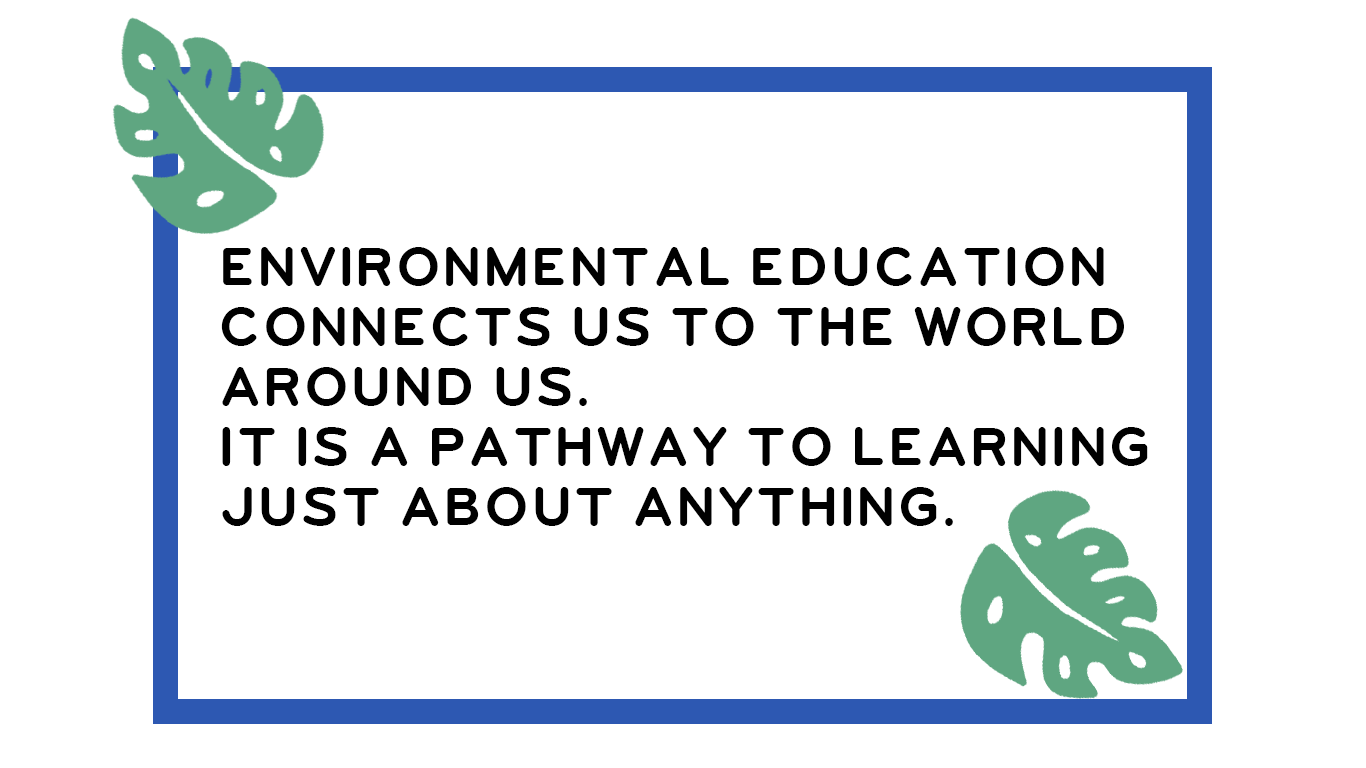
<style>
.page{position:relative;width:1366px;height:768px;background:#ffffff}
.page>*{position:absolute;margin:0}
.t1{font:60px/60px "UGO-COLOR";letter-spacing:0.01em;color:#000000}
</style>
<div class="page">
<p class="t1" style="left:221px;top:247px;width:927px;height:279px">ENVIRONMENTAL EDUCATION CONNECTS US TO THE WORLD AROUND US. <br>IT IS A PATHWAY TO LEARNING JUST ABOUT ANYTHING.</p>
</div>
